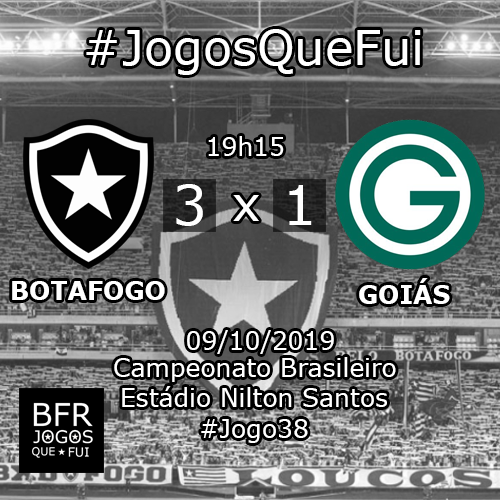
<style>
.page{position:relative;width:500px;height:500px}
.page>*{position:absolute;margin:0}
.t1{font:48px "Verdana";color:#ffffff}
.t2{font:25px "Verdana";color:#ffffff}
.t3{font:54.9px "Verdana";color:#ffffff}
.t4{font:55.3px "Verdana";color:#ffffff}
.t5{font:25px "Verdana-Bold";color:#ffffff}
</style>
<div class="page">
<p class="t1" style="left:86px;top:29px;width:335px;height:46px">#JogosQueFui</p>
<p class="t2" style="left:208px;top:136px;width:76px;height:20px">19h15</p>
<p class="t3" style="left:176px;top:184px;width:27px;height:42px">3</p>
<p class="t4" style="left:289px;top:185px;width:23px;height:40px">1</p>
<p class="t1" style="left:233px;top:195px;width:26px;height:26px">x</p>
<p class="t5" style="left:12px;top:281px;width:153px;height:19px">BOTAFOGO</p>
<p class="t5" style="left:359px;top:278px;width:91px;height:26px">GOIÁS</p>
<p class="t2" style="left:187px;top:330px;width:147px;height:24px">09/10/2019</p>
<p class="t2" style="left:114px;top:357px;width:282px;height:25px">Campeonato Brasileiro</p>
<p class="t2" style="left:122px;top:386px;width:265px;height:21px">Estádio Nilton Santos</p>
<p class="t2" style="left:201px;top:419px;width:107px;height:24px">#Jogo38</p>
</div>
